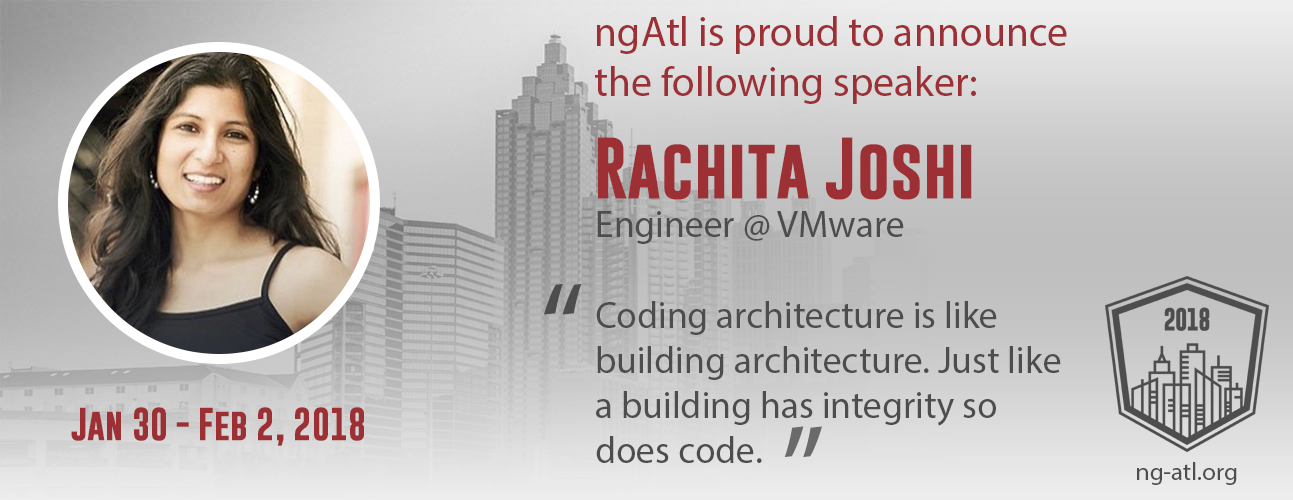
<style>
.page{position:relative;width:1293px;height:500px}
.page>*{position:absolute;margin:0}
.t1{font:41.7px "MyriadPro-Regular";color:#9d3035}
.t2{font:62.5px "GoboldBold";color:#9d3035}
.t3{font:37.5px "MyriadPro-Regular";color:#4d4d4e}
.t4{font:125px "MyriadPro-Regular";color:#4d4d4e}
.t5{font:33.3px "GoboldBold";color:#9d3035}
.t6{font:125px "MyriadPro-Regular";color:#6a6a6b}
.t7{font:25px "MyriadPro-Regular";color:#4d4d4e}
</style>
<div class="page">
<p class="t1" style="left:595px;top:16px;width:472px;height:88px">ngAtl is proud to announce the following speaker:</p>
<p class="t2" style="left:598px;top:137px;width:374px;height:63px">Rachita Joshi</p>
<p class="t3" style="left:597px;top:211px;width:307px;height:33px">Engineer @ VMware</p>
<p class="t4" style="left:544px;top:283px;width:38px;height:32px">“</p>
<p class="t3" style="left:596px;top:301px;width:465px;height:162px">Coding architecture is like building architecture. Just like a building has integrity so does code.</p>
<p class="t5" style="left:71px;top:407px;width:293px;height:39px">Jan 30 - Feb 2, 2018</p>
<p class="t6" style="left:784px;top:426px;width:38px;height:32px;rotate:180deg">“</p>
<p class="t7" style="left:1137px;top:462px;width:100px;height:23px">ng-atl.org</p>
</div>
